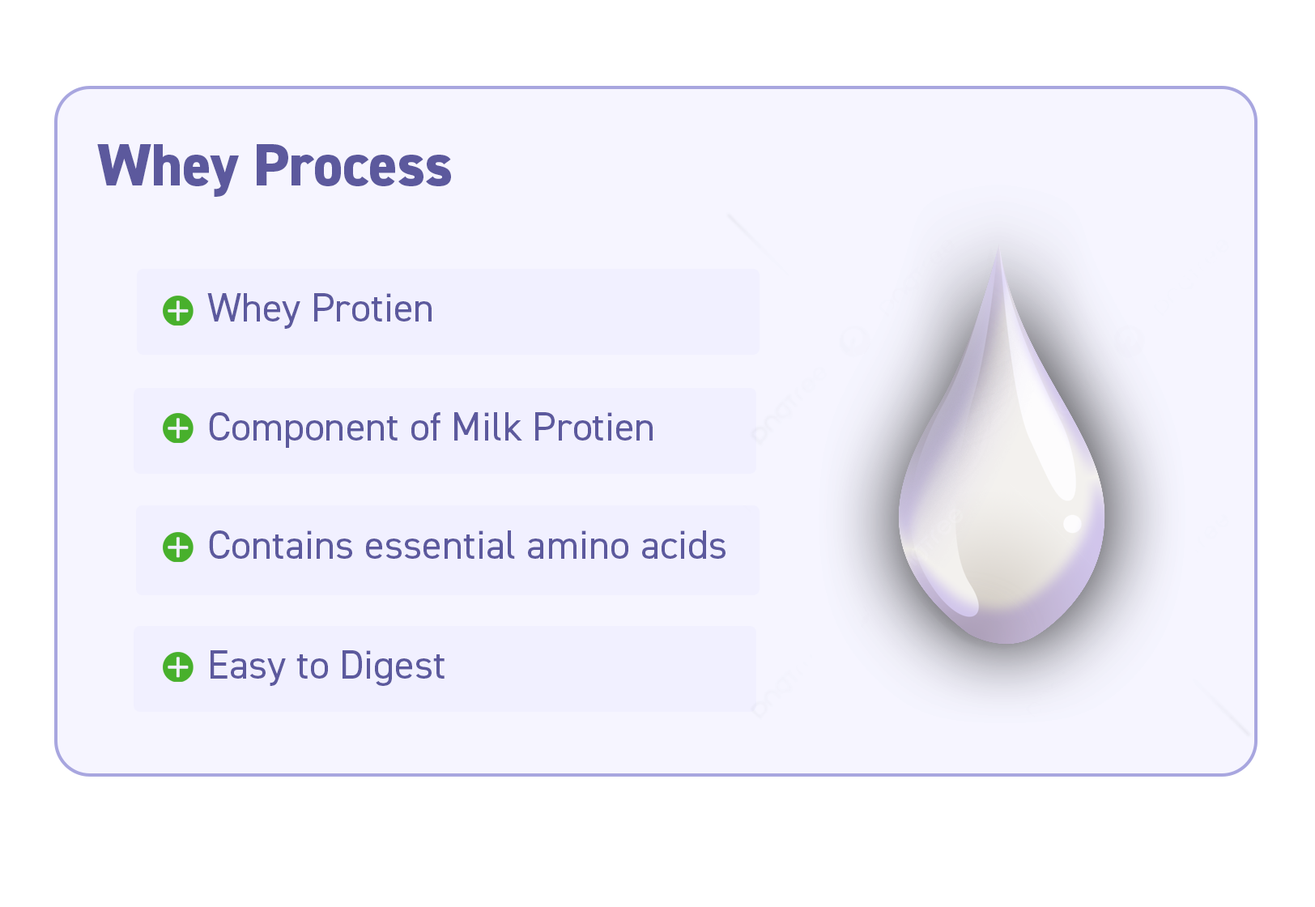
<style>
.page{position:relative;width:1315px;height:907px;background:#f6f5ff}
.page>*{position:absolute;margin:0}
.t1{font:59.4px "DIN2014-ExtraBold";color:#5c599d}
.t2{font:59.4px "DIN2014-Regular";color:#5c599d}
.t3{font:40.5px "DIN2014-Regular";color:#5c599d}
</style>
<div class="page">
<p class="t1" style="left:97px;top:144px;width:354px;height:53px"><span class="t2"><br>    </span>Whey Process</p>
<p class="t3" style="left:207px;top:293px;width:225px;height:36px">Whey Protien</p>
<p class="t3" style="left:209px;top:412px;width:444px;height:36px">Component of Milk Protien</p>
<p class="t3" style="left:209px;top:530px;width:516px;height:29px">Contains essential amino acids</p>
<p class="t3" style="left:211px;top:650px;width:234px;height:36px">Easy to Digest</p>
</div>
